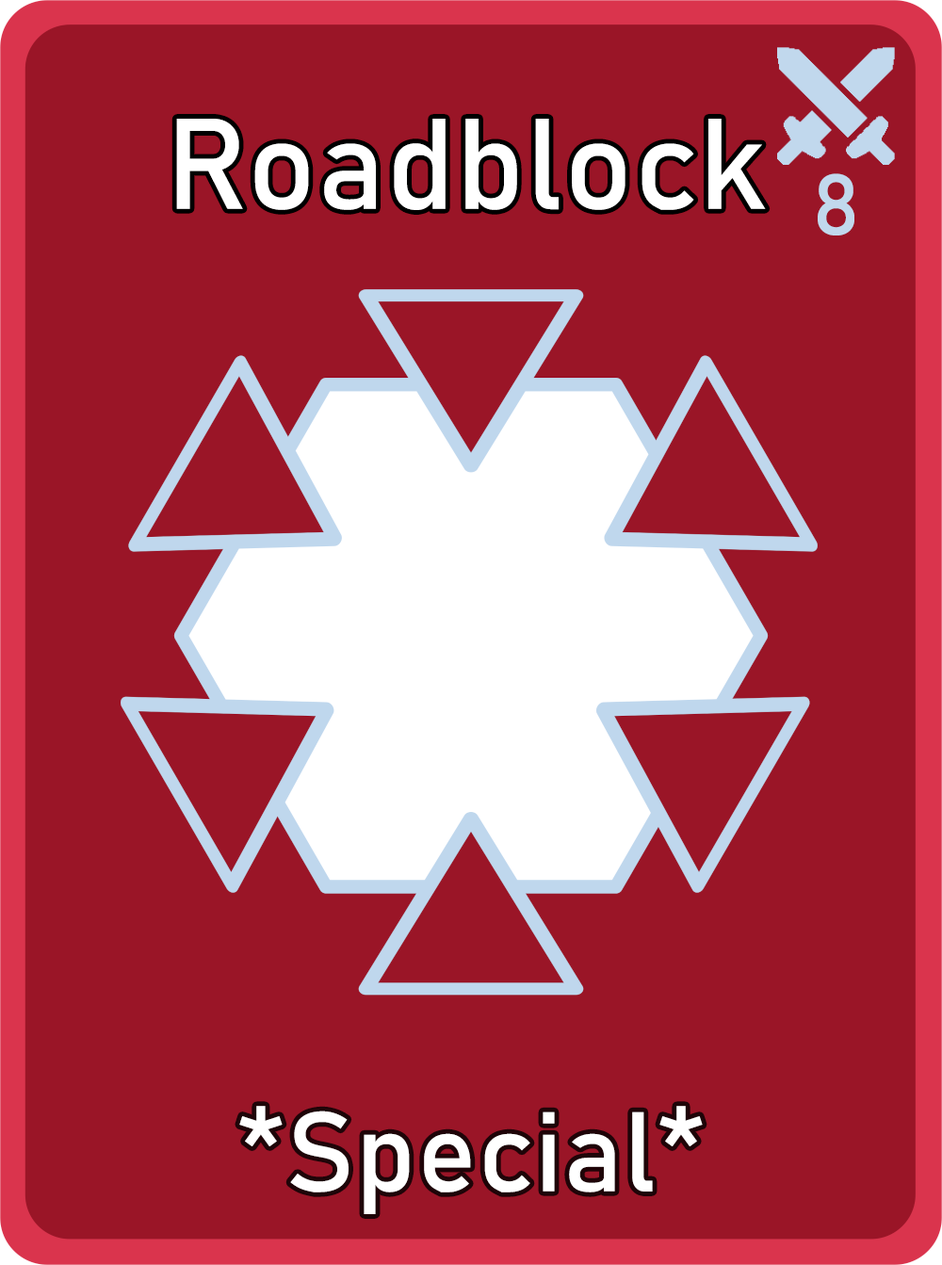
<style>
.page{position:relative;width:942px;height:1265px;background:#9a1527}
.page>*{position:absolute;margin:0}
.t1{font:126.7px "Bahnschrift";letter-spacing:0.01em;color:#ffffff}
.t2{font:85px "Bahnschrift";letter-spacing:0.01em;color:#c1d8ed}
.t3{font:111.3px "Bahnschrift";letter-spacing:0.01em;color:#ffffff}
</style>
<div class="page">
<p class="t1" style="left:176px;top:119px;width:590px;height:91px">Roadblock</p>
<p class="t2" style="left:818px;top:173px;width:37px;height:63px">8</p>
<p class="t3" style="left:239px;top:1106px;width:464px;height:109px">*Special*</p>
</div>
